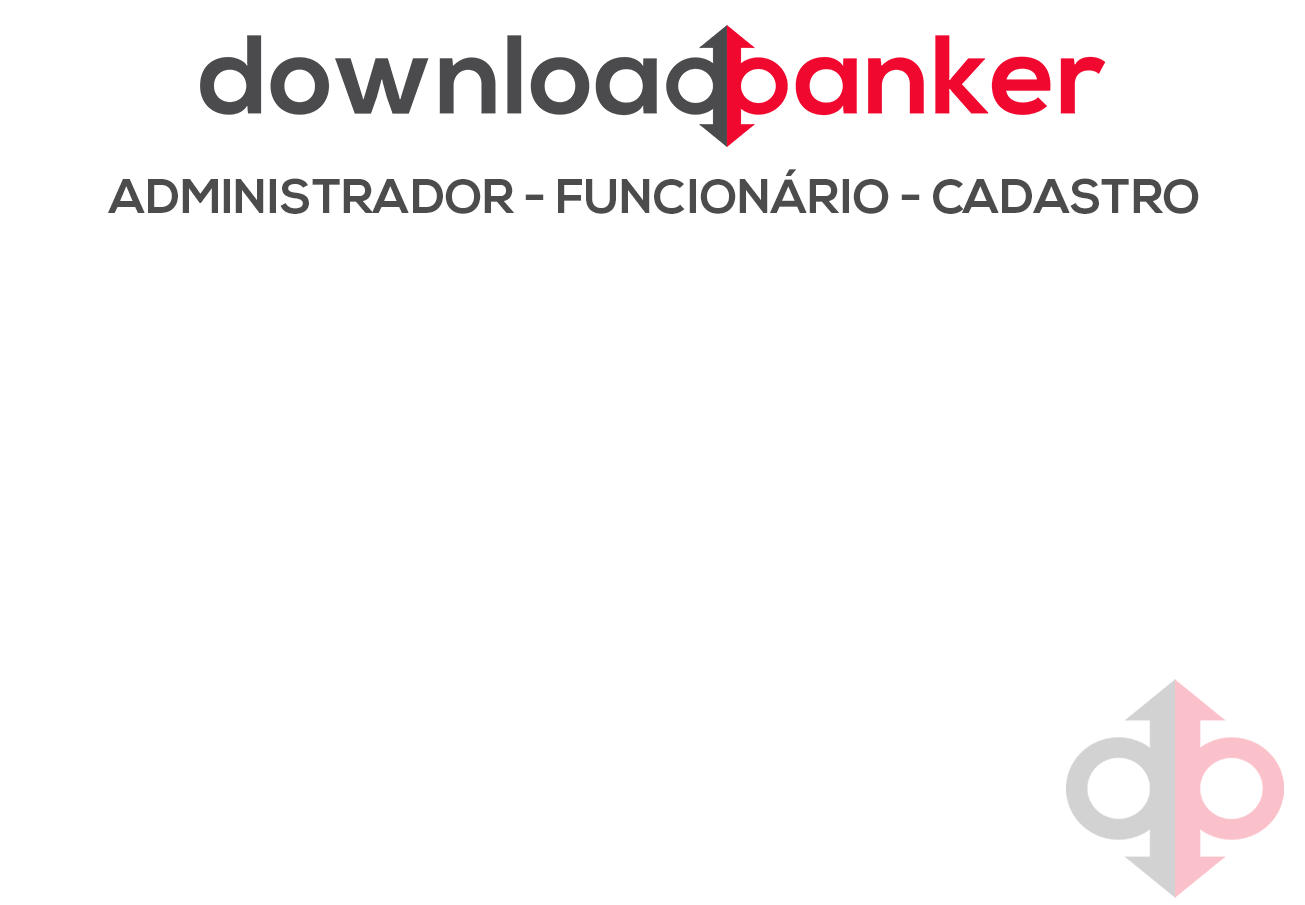
<style>
.page{position:relative;width:1305px;height:905px;background:#ffffff}
.page>*{position:absolute;margin:0}
.t1{font:48px "NexaBold";color:#4c4c4c}
</style>
<div class="page">
<p class="t1" style="left:108px;top:169px;width:1091px;height:45px">ADMINISTRADOR - FUNCIONÁRIO - CADASTRO</p>
</div>
